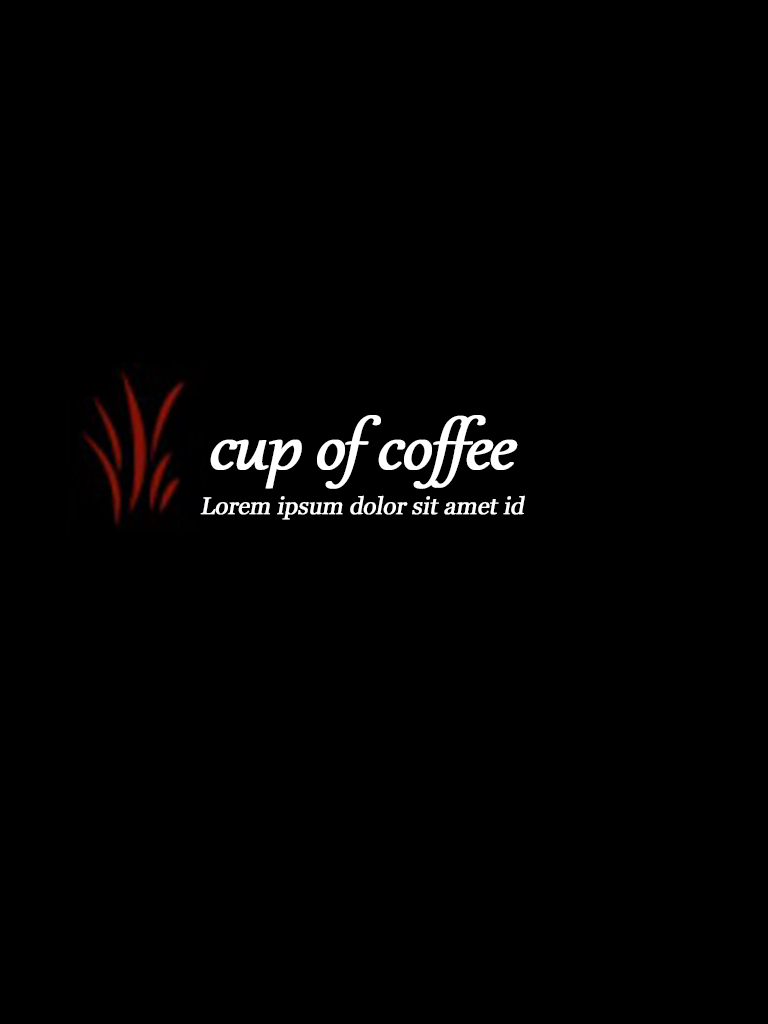
<style>
.page{position:relative;width:768px;height:1024px;background:#000000}
.page>*{position:absolute;margin:0}
.t1{font:80px "Gabriola";letter-spacing:-0.025em;color:#ffffff;font-weight:bold;font-style:italic}
.t2{font:24px "Georgia";letter-spacing:-0.025em;color:#ffffff;font-weight:bold;font-style:italic}
</style>
<div class="page">
<p class="t1" style="left:210px;top:415px;width:308px;height:74px">cup of coffee</p>
<p class="t2" style="left:200px;top:495px;width:325px;height:25px">Lorem ipsum dolor sit amet id</p>
</div>
